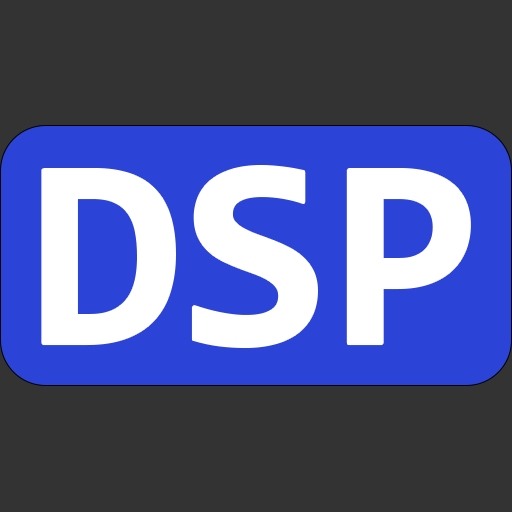
<style>
.page{position:relative;width:512px;height:512px;background:#333333}
.page>*{position:absolute;margin:0}
.t1{font:271px "Consolas-Bold";color:#ffffff}
</style>
<div class="page">
<p class="t1" style="left:43px;top:167px;width:426px;height:179px">DSP</p>
</div>
